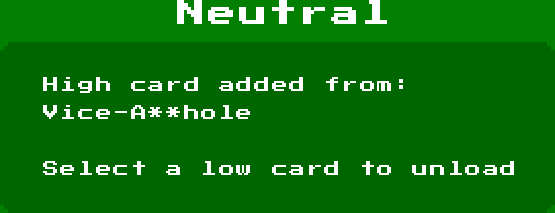
<style>
.page{position:relative;width:555px;height:213px;background:#006600}
.page>*{position:absolute;margin:0}
.t1{font:28px "PressStart2P-Regular";letter-spacing:0.1em;color:#ffffff}
.t2{font:16px/28px "PressStart2P-Regular";letter-spacing:0.1em;color:#ffffff}
</style>
<div class="page">
<p class="t1" style="left:177px;top:0px;width:210px;height:24px">Neutral</p>
<p class="t2" style="left:43px;top:77px;width:471px;height:98px">High card added from: <br>Vice-A**hole<br><br>Select a low card to unload</p>
</div>
